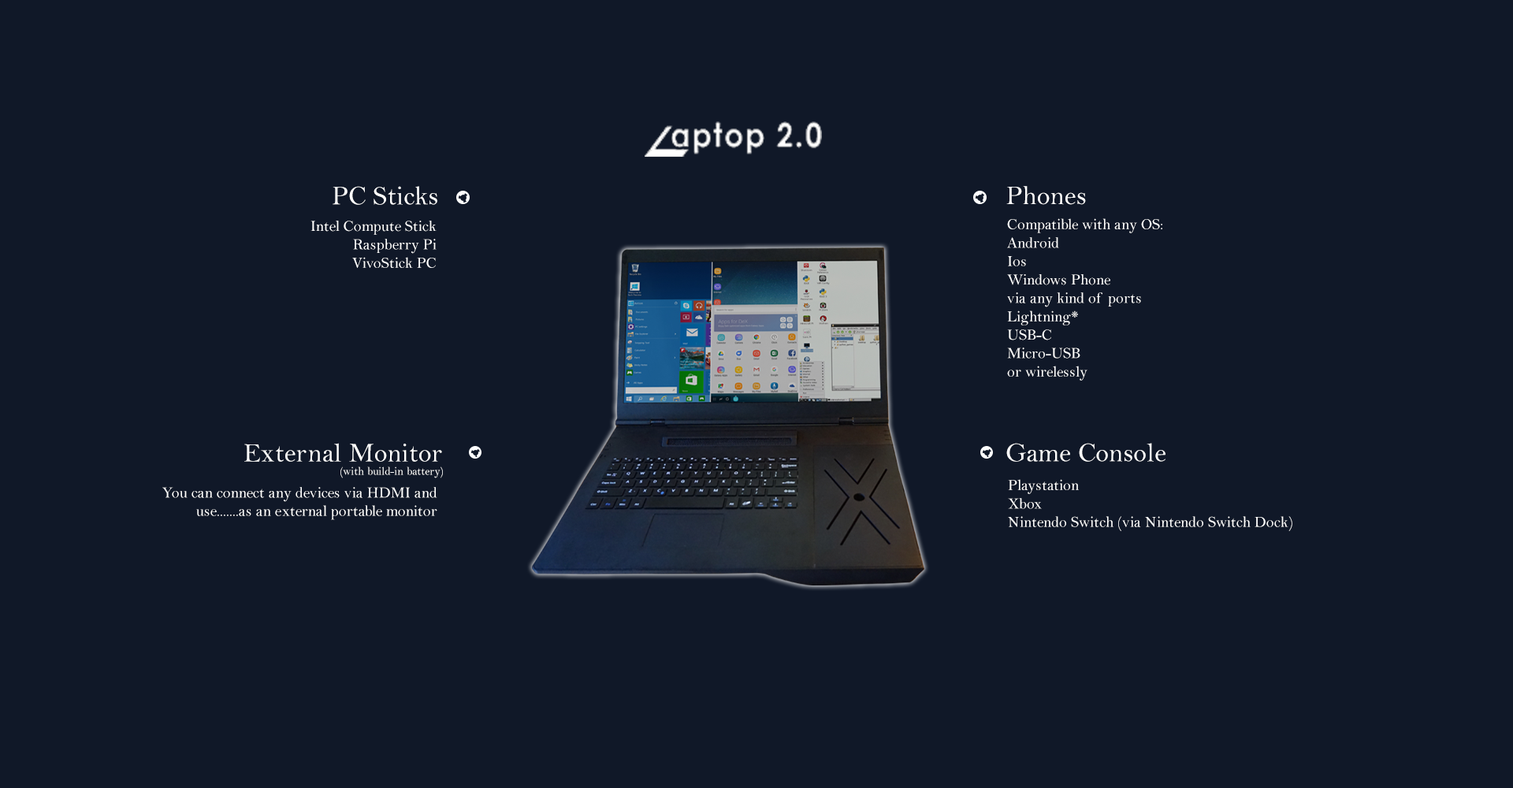
<style>
.page{position:relative;width:1513px;height:788px;background:#101828}
.page>*{position:absolute;margin:0}
.t1{font:26.8px "BellMT";color:#ffffff}
.t2{font:15.3px "BellMT";color:#ffffff}
.t3{font:11.5px "BellMT";color:#ffffff}
</style>
<div class="page">
<p class="t1" style="left:333px;top:186px;width:104px;height:19px">PC Sticks</p>
<p class="t1" style="left:1006px;top:186px;width:80px;height:19px">Phones</p>
<p class="t2" style="left:311px;top:221px;width:126px;height:47px;text-align:right">Intel Compute Stick<br>Raspberry Pi<br>VivoStick PC</p>
<p class="t2" style="left:1007px;top:218px;width:155px;height:163px">Compatible with any OS:<br>Android<br>Ios<br>Windows Phone<br>via any kind of ports<br>Lightning*<br>USB-C<br>Micro-USB<br>or wirelessly</p>
<p class="t1" style="left:244px;top:443px;width:198px;height:19px">External Monitor</p>
<p class="t1" style="left:1006px;top:443px;width:160px;height:19px">Game Console</p>
<p class="t3" style="left:340px;top:467px;width:103px;height:11px">(with build-in battery)</p>
<p class="t2" style="left:1008px;top:479px;width:284px;height:52px">Playstation<br>Xbox<br>Nintendo Switch (via Nintendo Switch Dock)</p>
<p class="t2" style="left:162px;top:487px;width:275px;height:33px;text-align:right">You can connect any devices via HDMI and use.......as an external portable monitor</p>
</div>
